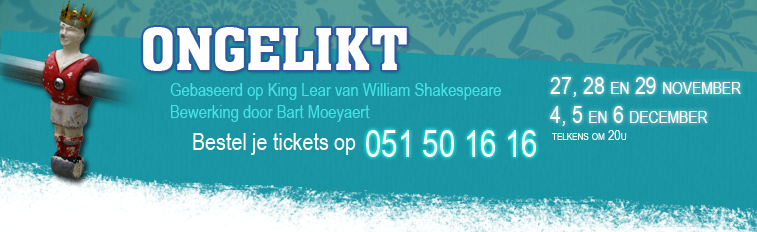
<style>
.page{position:relative;width:757px;height:232px}
.page>*{position:absolute;margin:0}
.t1{font:60px "akaChen";color:#ffffff}
.t2{font:24px "ArialNarrow";color:#ffffff;font-variant:small-caps}
.t3{font:18px "ArialNarrow";color:#44e1e3}
.t4{font:24px "ArialNarrow";color:#ffffff}
.t5{font:36px "ArialNarrow";color:#ffffff}
.t6{font:14px "ArialNarrow";color:#ffffff;font-variant:small-caps}
</style>
<div class="page">
<p class="t1" style="left:143px;top:27px;width:264px;height:44px">ONGELIKT</p>
<p class="t2" style="left:550px;top:77px;width:191px;height:49px">27, 28 en 29 november<br>4, 5 en 6 december</p>
<p class="t3" style="left:170px;top:83px;width:331px;height:39px">Gebaseerd op King Lear van William Shakespeare<br>Bewerking door Bart Moeyaert</p>
<p class="t4" style="left:193px;top:133px;width:163px;height:22px">Bestel je tickets op</p>
<p class="t5" style="left:366px;top:130px;width:170px;height:27px">051 50 16 16</p>
<p class="t6" style="left:552px;top:130px;width:75px;height:10px">telkens om 20u</p>
</div>
